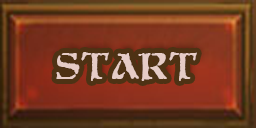
<style>
.page{position:relative;width:256px;height:128px}
.page>*{position:absolute;margin:0}
.t1{font:32px "MoriaCitadel";color:#e6ccc7}
</style>
<div class="page">
<p class="t1" style="left:56px;top:52px;width:141px;height:29px">Start</p>
</div>
